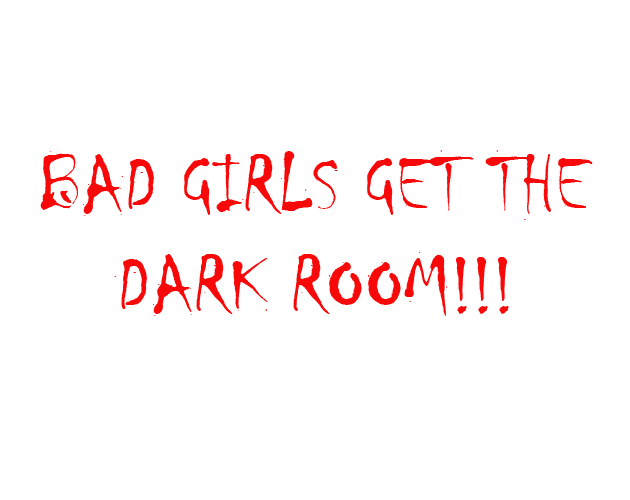
<style>
.page{position:relative;width:630px;height:500px;background:#ffffff}
.page>*{position:absolute;margin:0}
.t1{font:83.3px "Chiller-Regular";color:#f80909}
</style>
<div class="page">
<p class="t1" style="left:40px;top:150px;width:553px;height:166px;text-align:center">BAD GIRLS GET THE DARK ROOM!!!</p>
</div>
